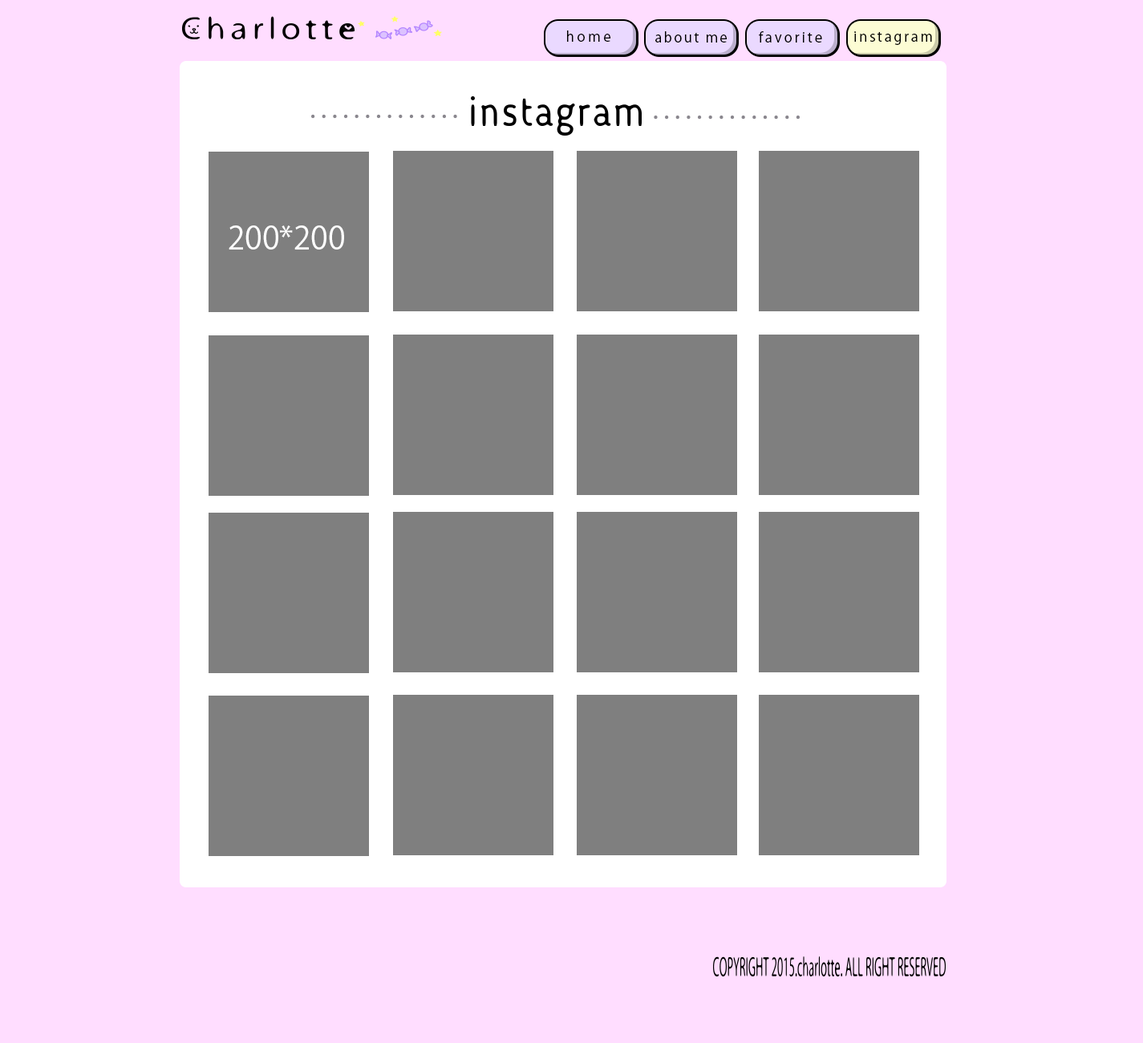
<style>
.page{position:relative;width:1143px;height:1043px;background:#ffddff}
.page>*{position:absolute;margin:0}
.t1{font:13.6px "KozGoPr6N-Regular";letter-spacing:0.22em;color:#000000}
.t2{font:13.6px "KozGoPr6N-Regular";letter-spacing:0.14em;color:#000000}
.t3{font:13.6px "KozGoPr6N-Regular";letter-spacing:0.18em;color:#000000}
.t4{font:13.6px "KozGoPr6N-Regular";letter-spacing:0.16em;color:#000000}
.t5{font:31.3px "KozGoPr6N-Regular";color:#ffffff}
</style>
<div class="page">
<p class="t1" style="left:567px;top:30px;width:44px;height:12px">home</p>
<p class="t2" style="left:655px;top:31px;width:72px;height:12px">about me</p>
<p class="t3" style="left:759px;top:31px;width:63px;height:12px">favorite</p>
<p class="t4" style="left:854px;top:31px;width:78px;height:14px">instagram</p>
<p class="t5" style="left:229px;top:225px;width:115px;height:25px">200*200</p>
</div>
